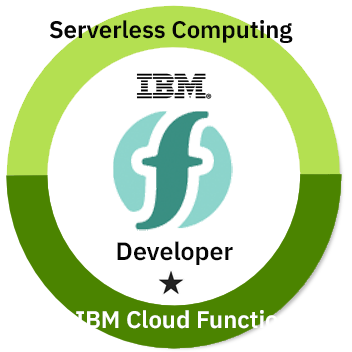
<style>
.page{position:relative;width:352px;height:352px;background:#ffffff}
.page>*{position:absolute;margin:0}
.t1{font:23.9px "IBMPlexSans-SemiBold";color:#050505}
.t2{font:24.9px "IBMPlexSans-SemiBold";color:#050505}
.t3{font:23.9px "IBMPlexSans-SemiBold";color:#ffffff}
</style>
<div class="page">
<p class="t1" style="left:50px;top:20px;width:243px;height:23px">Serverless Computing</p>
<p class="t2" style="left:117px;top:241px;width:116px;height:24px">Developer</p>
<p class="t3" style="left:76px;top:310px;width:228px;height:19px">IBM Cloud Functions</p>
</div>
